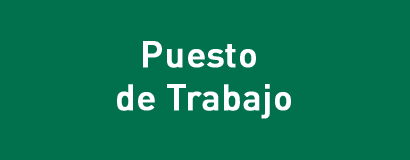
<style>
.page{position:relative;width:410px;height:160px;background:#00704d}
.page>*{position:absolute;margin:0}
.t1{font:36px "DINPro-Medium";color:#ffffff;font-weight:bold}
</style>
<div class="page">
<p class="t1" style="left:117px;top:41px;width:174px;height:78px;text-align:center">Puesto <br>de Trabajo</p>
</div>
